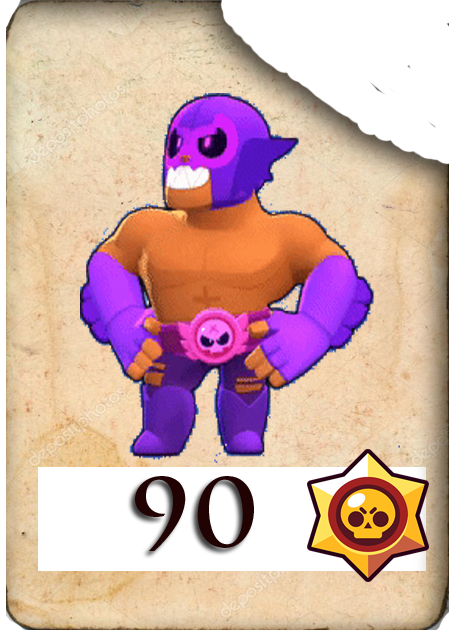
<style>
.page{position:relative;width:449px;height:635px;background:#ffffff}
.page>*{position:absolute;margin:0}
.t1{font:100px "CharlemagneStd-Bold";color:#210303}
</style>
<div class="page">
<p class="t1" style="left:135px;top:476px;width:119px;height:75px">90</p>
</div>
